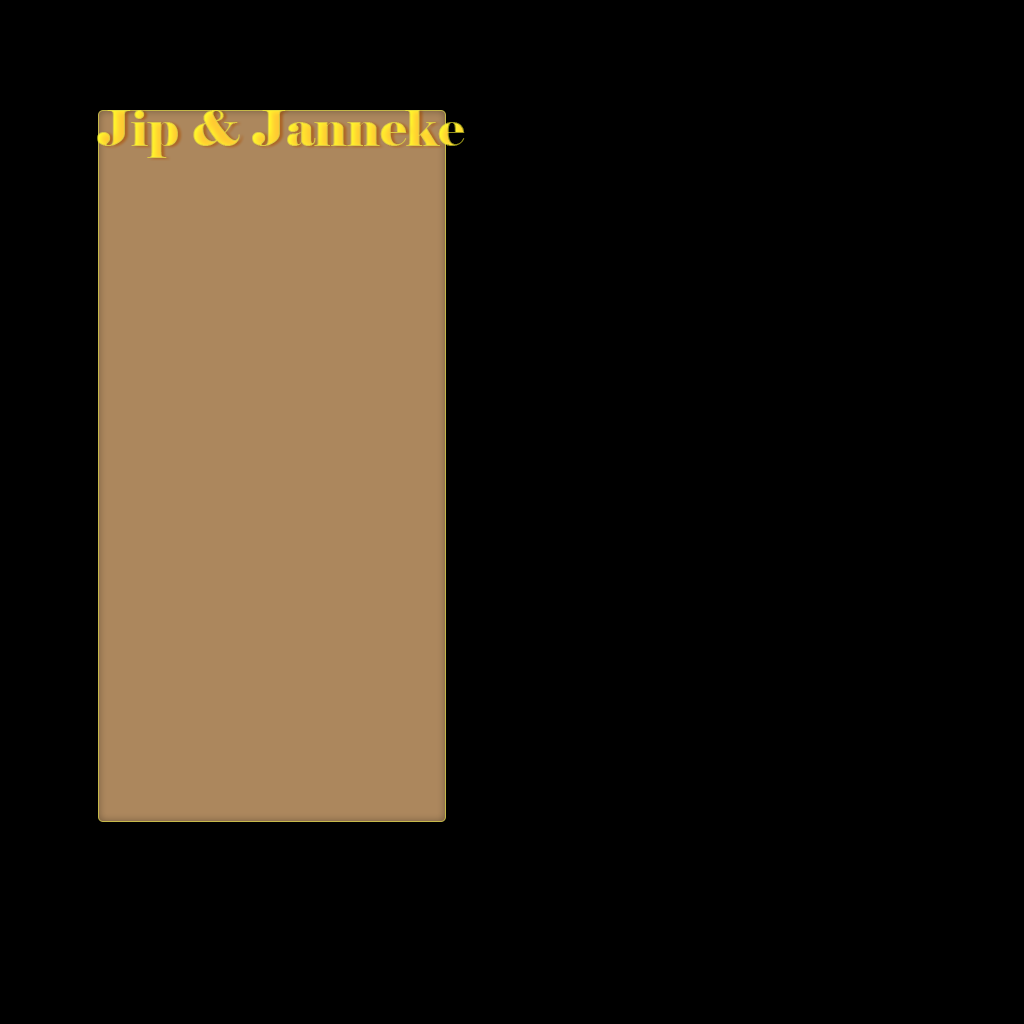
<style>
.page{position:relative;width:1024px;height:1024px;background:#000000}
.page>*{position:absolute;margin:0}
.t1{font:50px "Elephant-Regular";color:#ffd930}
</style>
<div class="page">
<p class="t1" style="left:97px;top:110px;width:368px;height:48px">Jip &amp; Janneke</p>
</div>
